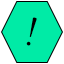
<style>
.page{position:relative;width:64px;height:64px;background:#00eba6}
.page>*{position:absolute;margin:0}
.t1{font:40px "HoeflerText-Italic";color:#000000}
</style>
<div class="page">
<p class="t1" style="left:26px;top:17px;width:11px;height:29px">!</p>
</div>
